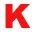
<style>
.page{position:relative;width:32px;height:32px;background:#ffffff}
.page>*{position:absolute;margin:0}
.t1{font:33.3px "Arial-Black";color:#f21313}
</style>
<div class="page">
<p class="t1" style="left:5px;top:4px;width:26px;height:24px">K</p>
</div>
